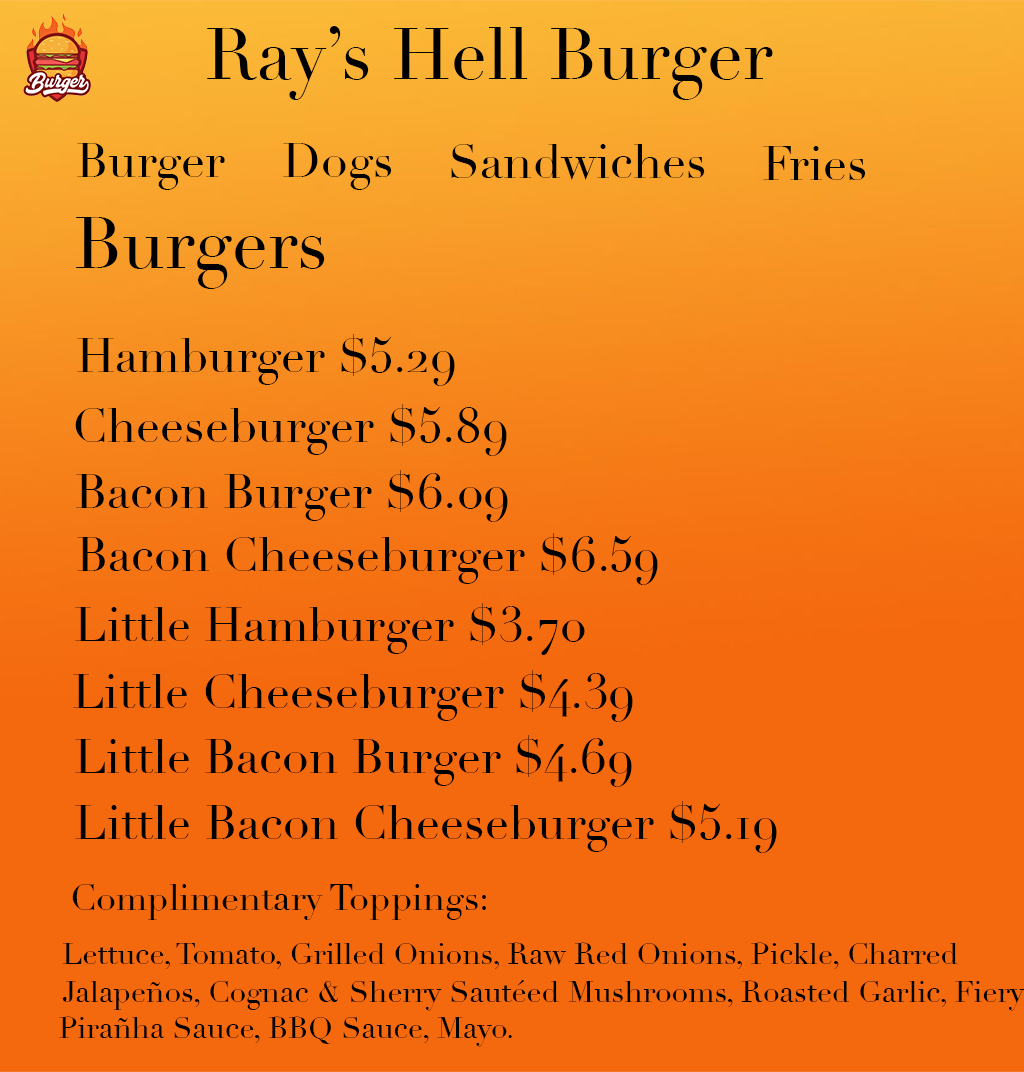
<style>
.page{position:relative;width:1024px;height:1072px;background:#f4690e}
.page>*{position:absolute;margin:0}
.t1{font:72px "Didot";color:#000000}
.t2{font:48px "Didot";color:#000000}
.t3{font:36px "Didot";color:#000000}
.t4{font:30px "Didot";color:#000000}
</style>
<div class="page">
<p class="t1" style="left:207px;top:26px;width:566px;height:74px">Ray’s Hell Burger</p>
<p class="t2" style="left:77px;top:143px;width:148px;height:47px">Burger</p>
<p class="t2" style="left:283px;top:143px;width:109px;height:47px">Dogs</p>
<p class="t2" style="left:451px;top:144px;width:254px;height:36px">Sandwiches</p>
<p class="t2" style="left:763px;top:146px;width:103px;height:34px">Fries</p>
<p class="t1" style="left:76px;top:217px;width:249px;height:72px">Burgers</p>
<p class="t2" style="left:77px;top:334px;width:378px;height:52px">Hamburger $5.29</p>
<p class="t2" style="left:75px;top:404px;width:432px;height:52px">Cheeseburger $5.89</p>
<p class="t2" style="left:76px;top:470px;width:432px;height:52px">Bacon Burger $6.09</p>
<p class="t2" style="left:77px;top:533px;width:581px;height:52px">Bacon Cheeseburger $6.59</p>
<p class="t2" style="left:75px;top:603px;width:510px;height:52px">Little Hamburger $3.70</p>
<p class="t2" style="left:73px;top:670px;width:560px;height:52px">Little Cheeseburger $4.39</p>
<p class="t2" style="left:75px;top:735px;width:557px;height:52px">Little Bacon Burger $4.69</p>
<p class="t2" style="left:75px;top:801px;width:702px;height:52px">Little Bacon Cheeseburger $5.19</p>
<p class="t3" style="left:72px;top:884px;width:414px;height:36px">Complimentary Toppings:</p>
<p class="t4" style="left:62px;top:942px;width:896px;height:27px">Lettuce, Tomato, Grilled Onions, Raw Red Onions, Pickle, Charred</p>
<p class="t4" style="left:62px;top:980px;width:963px;height:31px">Jalapeños, Cognac &amp; Sherry Sautéed Mushrooms, Roasted Garlic, Fiery</p>
<p class="t4" style="left:59px;top:1016px;width:453px;height:31px">Pirañha Sauce, BBQ Sauce, Mayo.</p>
</div>
